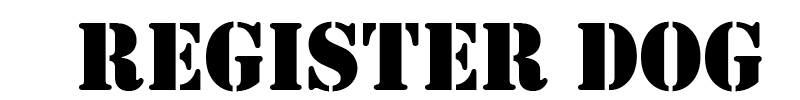
<style>
.page{position:relative;width:800px;height:100px;background:#ffffff}
.page>*{position:absolute;margin:0}
.t1{font:100px "Stencil";color:#000000}
</style>
<div class="page">
<p class="t1" style="left:79px;top:21px;width:683px;height:71px">REGISTER DOG</p>
</div>
